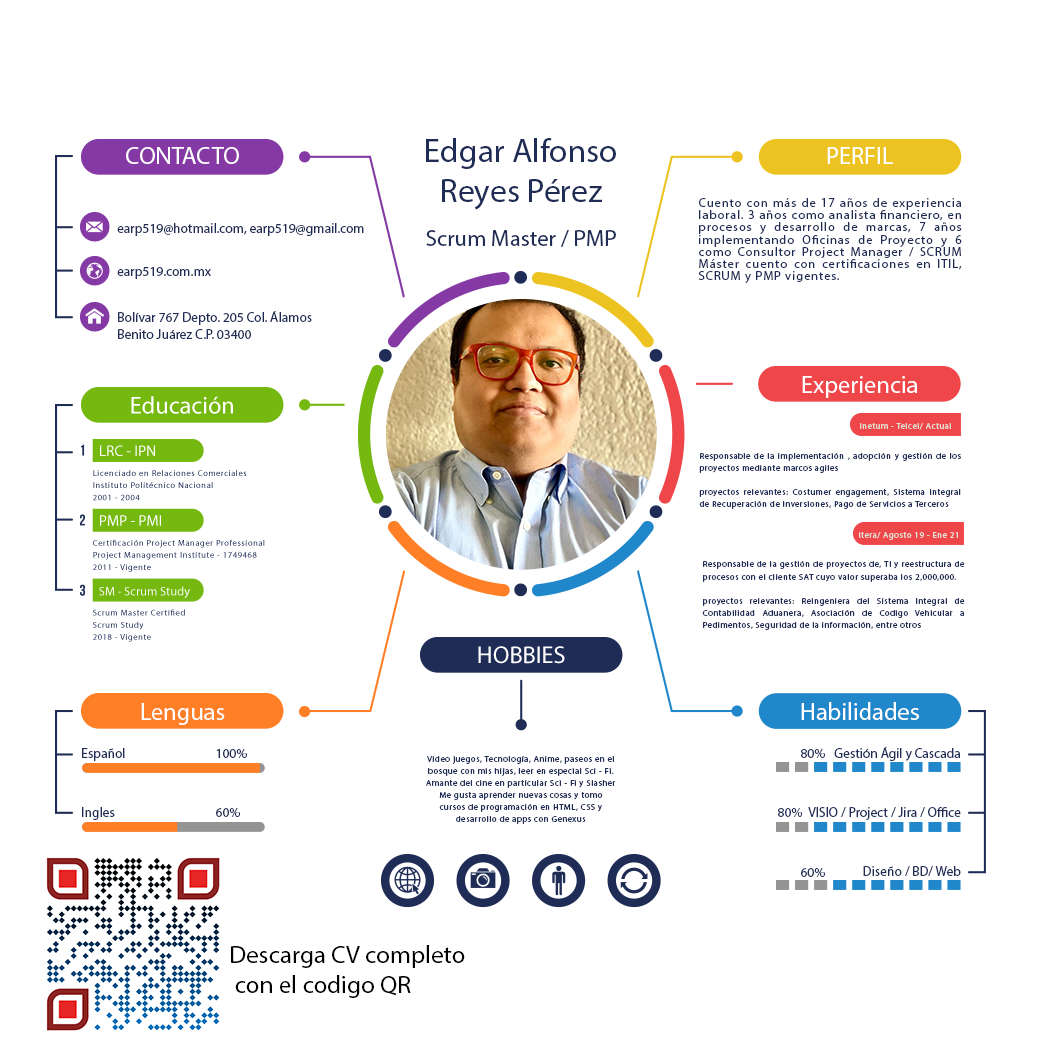
<style>
.page{position:relative;width:1042px;height:1042px;background:#ffffff}
.page>*{position:absolute;margin:0}
.t1{font:24.3px "Montserrat-Bold";color:#ffffff}
.t2{font:33.3px "Montserrat-Black";color:#1f2c56}
.t3{font:12.5px/12.2px "Montserrat-Regular";letter-spacing:0.075em;color:#1f2c56}
.t4{font:13.5px "Montserrat-Medium";color:#1f2c56}
.t5{font:22.9px "Montserrat-Medium";color:#1f2c56}
.t6{font:8.4px "Montserrat-Bold";letter-spacing:0.075em;color:#e0e0d2}
.t7{font:8.4px/12.2px "Montserrat-Regular";letter-spacing:0.075em;color:#1f2c56}
.t8{font:8.4px/12.2px "Montserrat-Bold";letter-spacing:0.075em;color:#1f2c56}
.t9{font:13.5px "Montserrat-Bold";color:#1f2c56}
.t10{font:12px "MyriadPro-Regular";color:#000000}
</style>
<div class="page">
<p class="t1" style="left:126px;top:147px;width:113px;height:17px">CONTACTO</p>
<p class="t2" style="left:426px;top:138px;width:190px;height:72px;text-align:center">Edgar Alfonso<br>Reyes Pérez</p>
<p class="t1" style="left:827px;top:147px;width:66px;height:17px">PERFIL</p>
<p class="t3" style="left:698px;top:198px;width:264px;height:85px;text-align:justify">Cuento con más de 17 años de experiencia laboral. 3 años como analista financiero, en procesos y desarrollo de marcas, 7 años implementando Oficinas de Proyecto y 6 como Consultor Project Manager / SCRUM Máster cuento con certificaciones en ITIL, SCRUM y PMP vigentes.</p>
<p class="t4" style="left:117px;top:223px;width:247px;height:13px">earp519@hotmail.com, earp519@gmail.com</p>
<p class="t5" style="left:426px;top:230px;width:190px;height:17px">Scrum Master / PMP</p>
<p class="t4" style="left:117px;top:267px;width:94px;height:12px">earp519.com.mx</p>
<p class="t4" style="left:118px;top:311px;width:194px;height:28px;text-align:justify">Bolívar 767 Depto. 205 Col. Álamos<br>Benito Juárez C.P. 03400</p>
<p class="t1" style="left:802px;top:376px;width:116px;height:22px">Experiencia</p>
<p class="t6" style="left:860px;top:423px;width:91px;height:7px">Inetum - Telcel/ Actual</p>
<p class="t7" style="left:699px;top:453px;width:262px;height:56px;text-align:justify">Responsable de la implementación , adopción y gestión de los proyectos mediante marcos agiles  <br><span class="t8"><br>proyectos relevantes: </span>Costumer engagement, Sistema Integral de Recuperación de Inversiones, Pago de Servicios a Terceros</p>
<p class="t6" style="left:859px;top:532px;width:99px;height:8px">Itera/ Agosto 19 - Ene 21</p>
<p class="t7" style="left:702px;top:561px;width:263px;height:69px;text-align:justify">Responsable de la gestión de proyectos de, TI y reestructura de procesos con el cliente SAT cuyo valor superaba los 2,000,000.<br><br><span class="t8">proyectos relevantes: </span>Reingeniera del Sistema Integral de Contabilidad Aduanera, Asociación de Codigo Vehicular a Pedimentos, Seguridad de la información, entre otros</p>
<p class="t1" style="left:801px;top:702px;width:118px;height:18px">Habilidades</p>
<p class="t1" style="left:141px;top:703px;width:84px;height:22px">Lenguas</p>
<p class="t4" style="left:82px;top:748px;width:43px;height:13px">Español</p>
<p class="t9" style="left:216px;top:749px;width:31px;height:9px">100%</p>
<p class="t9" style="left:801px;top:749px;width:24px;height:9px">80%</p>
<p class="t4" style="left:834px;top:747px;width:126px;height:14px">Gestión Ágil y Cascada</p>
<p class="t7" style="left:426px;top:756px;width:190px;height:68px;text-align:center">Video juegos, Tecnología, Anime, paseos en el bosque con mis hijas, leer en especial Sci - Fi.<br>Amante del cine en particular Sci - Fi y Slasher<br>Me gusta aprender nuevas cosas y tomo cursos de programación en HTML, CSS y desarrollo de apps con Genexus</p>
<p class="t4" style="left:82px;top:807px;width:33px;height:13px">Ingles</p>
<p class="t9" style="left:216px;top:808px;width:24px;height:9px">60%</p>
<p class="t9" style="left:778px;top:808px;width:24px;height:9px">80%</p>
<p class="t4" style="left:808px;top:807px;width:153px;height:13px">VISIO / Project / Jira / Office</p>
<p class="t9" style="left:801px;top:868px;width:24px;height:9px">60%</p>
<p class="t4" style="left:863px;top:866px;width:98px;height:10px">Diseño / BD/ Web</p>
<p class="t10" style="left:231px;top:945px;width:234px;height:53px">Descarga CV completo<br> con el codigo QR</p>
</div>
